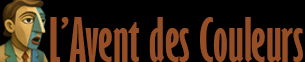
<style>
.page{position:relative;width:305px;height:62px;background:#000000}
.page>*{position:absolute;margin:0}
.t1{font:56px "GillSansMT-ExtraCondensedBold";color:#954e25}
</style>
<div class="page">
<p class="t1" style="left:50px;top:17px;width:253px;height:45px">L’Avent des Couleurs</p>
</div>
